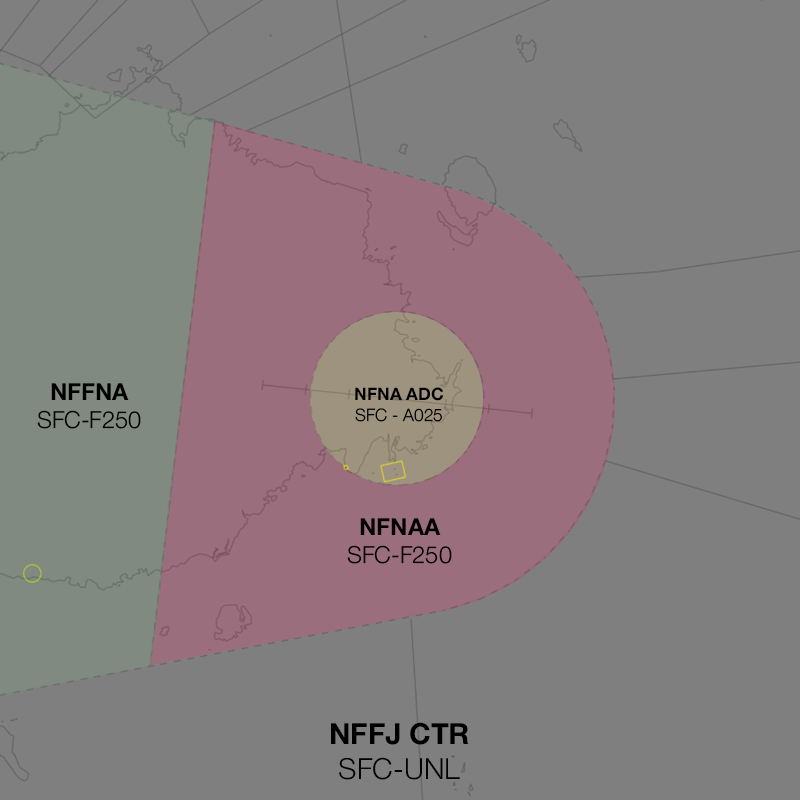
<style>
.page{position:relative;width:800px;height:800px;background:#7f7f7f}
.page>*{position:absolute;margin:0}
.t1{font:23.6px "HelveticaNeue-Light";color:#000000}
.t2{font:23.6px "HelveticaNeue-Bold";color:#000000}
.t3{font:17.2px "HelveticaNeue-Light";color:#000000}
.t4{font:17.2px "HelveticaNeue-Bold";color:#000000}
.t5{font:29.1px "HelveticaNeue-Bold";color:#000000}
.t6{font:29.1px "HelveticaNeue-Light";color:#000000}
</style>
<div class="page">
<p class="t1" style="left:37px;top:383px;width:104px;height:46px;text-align:center"><span class="t2">NFFNA<br></span>SFC-F250</p>
<p class="t3" style="left:355px;top:387px;width:89px;height:35px;text-align:center"><span class="t4">NFNA ADC<br></span>SFC - A025</p>
<p class="t1" style="left:347px;top:518px;width:105px;height:46px;text-align:center"><span class="t2">NFNAA<br></span>SFC-F250</p>
<p class="t5" style="left:331px;top:722px;width:138px;height:58px;text-align:center">NFFJ CTR<br><span class="t6">SFC-UNL</span></p>
</div>
